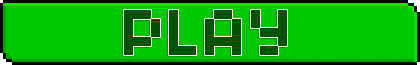
<style>
.page{position:relative;width:420px;height:65px;background:#00c700}
.page>*{position:absolute;margin:0}
.t1{font:72px "04b03";color:#005400}
</style>
<div class="page">
<p class="t1" style="left:124px;top:10px;width:163px;height:45px">PLAY</p>
</div>
